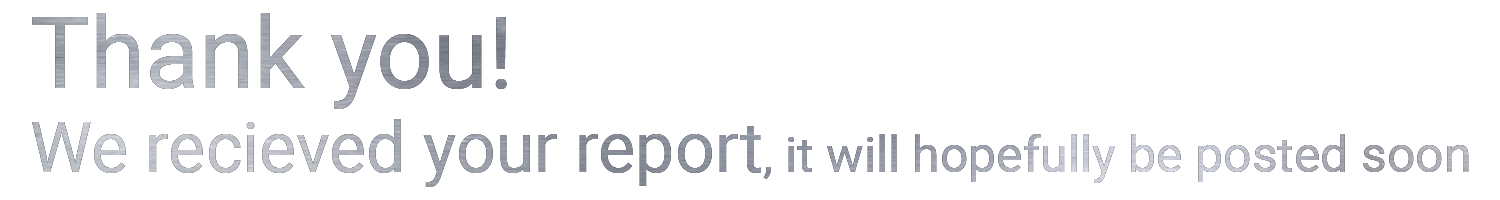
<style>
.page{position:relative;width:1500px;height:200px;background:#ffffff}
.page>*{position:absolute;margin:0}
.t1{font:50px "Roboto-Regular"}
.t2{font:100px "Roboto-Regular"}
.t3{font:70px "Roboto-Regular"}
</style>
<div class="page">
<p class="t1" style="left:32px;top:13px;width:1437px;height:174px"><span class="t2">Thank you!<br></span><span class="t3">We recieved your report</span>, it will hopefully be posted soon</p>
</div>
